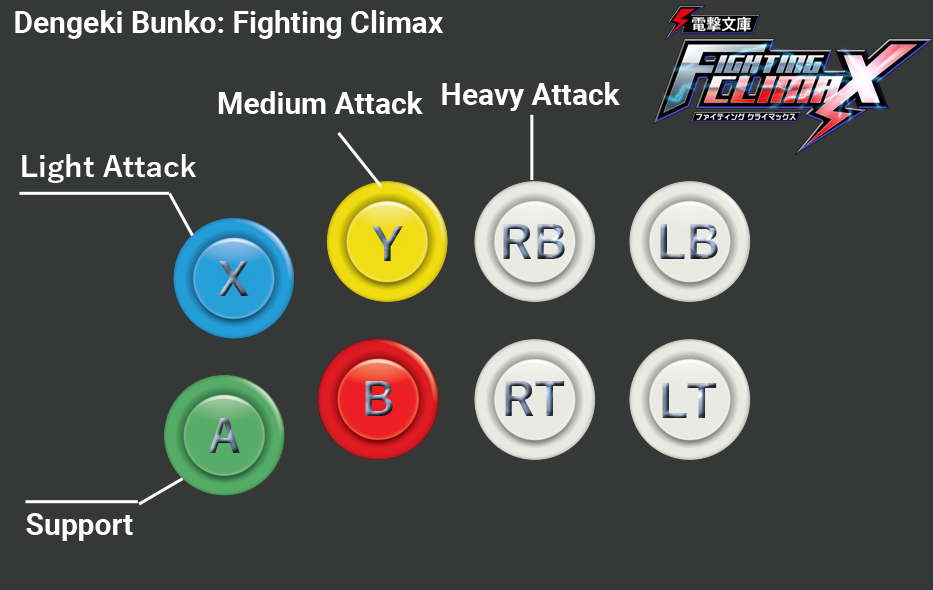
<style>
.page{position:relative;width:933px;height:590px;background:#363838}
.page>*{position:absolute;margin:0}
.t1{font:30px "Roboto-Bold";color:#ffffff}
.t2{font:30px "YuGothic-Bold";color:#ffffff}
</style>
<div class="page">
<p class="t1" style="left:15px;top:10px;width:428px;height:29px">Dengeki Bunko: Fighting Climax</p>
<p class="t1" style="left:442px;top:82px;width:178px;height:29px">Heavy Attack</p>
<p class="t1" style="left:218px;top:91px;width:205px;height:23px">Medium Attack</p>
<p class="t2" style="left:22px;top:154px;width:174px;height:29px">Light Attack</p>
<p class="t1" style="left:26px;top:513px;width:107px;height:28px">Support</p>
</div>
